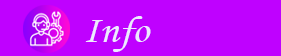
<style>
.page{position:relative;width:281px;height:56px;background:#bf01ff}
.page>*{position:absolute;margin:0}
.t1{font:37.5px "MonotypeCorsiva";color:#edeafe;scale:1.12 1}
</style>
<div class="page">
<p class="t1" style="left:85px;top:16px;width:66px;height:36px">Info</p>
</div>
